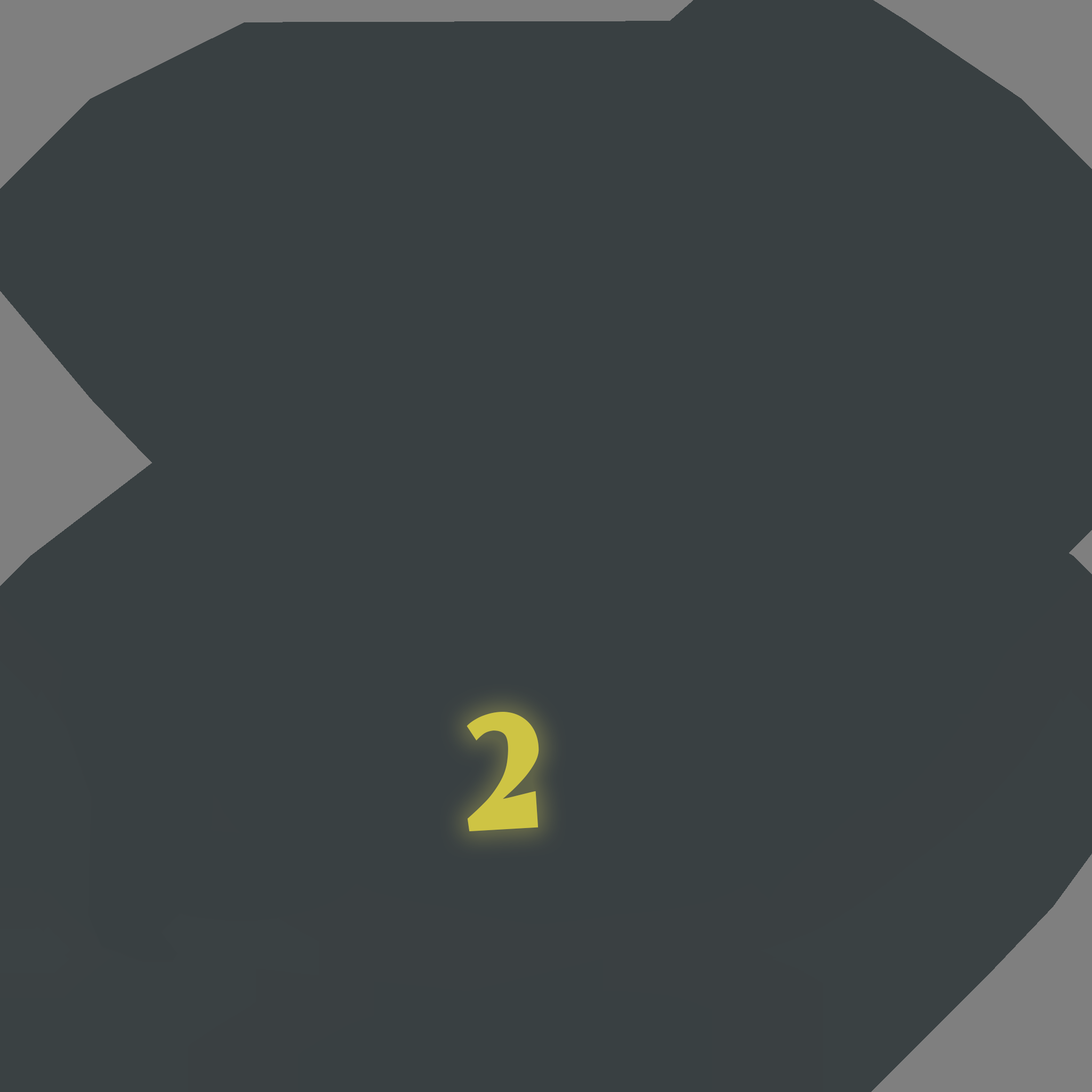
<style>
.page{position:relative;width:1092px;height:1092px;background:#394042}
.page>*{position:absolute;margin:0}
.t1{font:160px "WhimsyTT";color:#cec444}
</style>
<div class="page">
<p class="t1" style="left:467px;top:712px;width:72px;height:119px">2</p>
</div>
